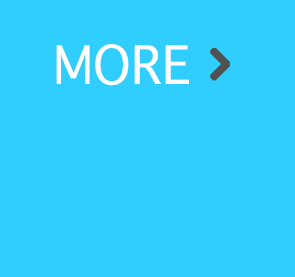
<style>
.page{position:relative;width:295px;height:277px;background:#30ceff}
.page>*{position:absolute;margin:0}
.t1{font:72px "AppleSymbols";color:#ffffff}
</style>
<div class="page">
<p class="t1" style="left:56px;top:44px;width:133px;height:42px">MORE</p>
</div>
